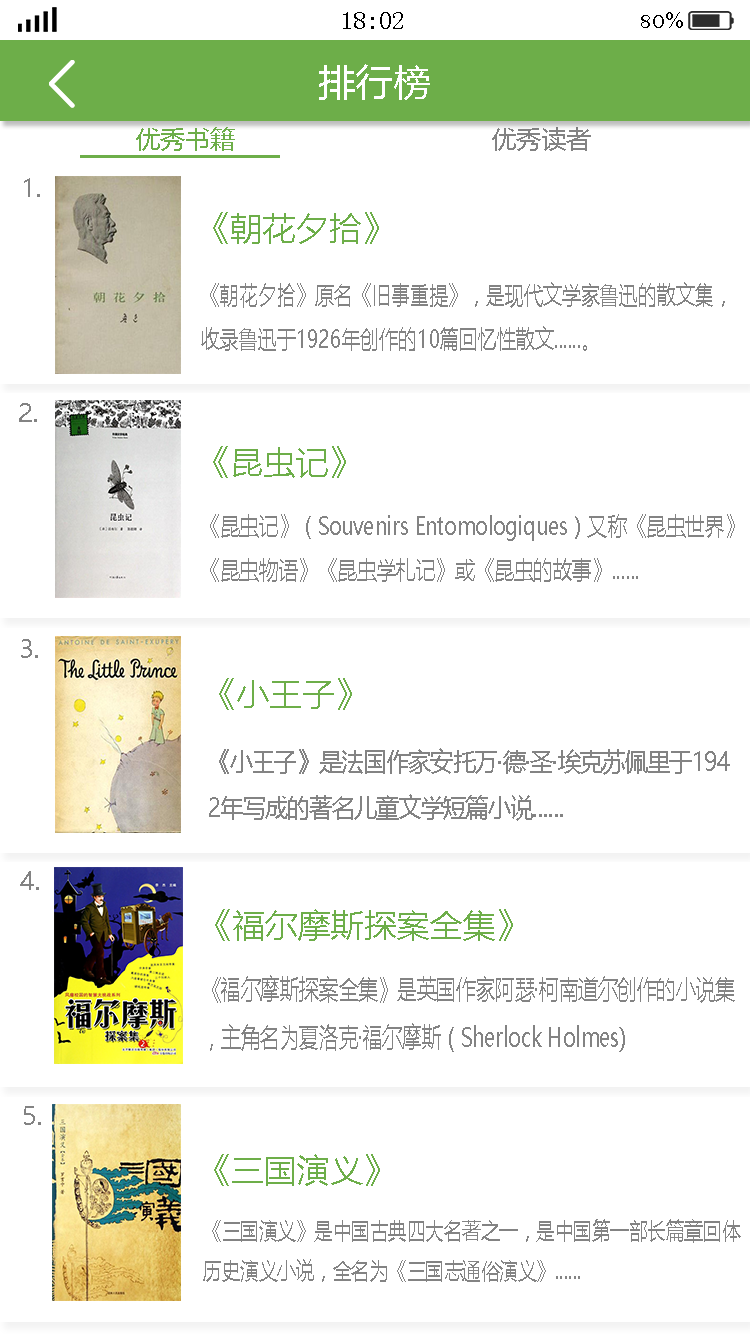
<style>
.page{position:relative;width:750px;height:1334px;background:#ffffff}
.page>*{position:absolute;margin:0}
.t1{font:25px "SimSun";color:#000000}
.t2{font:25px "BellMT";color:#000000}
.t3{font:37.5px "MicrosoftYaHei";color:#ffffff}
.t4{font:25px "MicrosoftYaHei";color:#6dae49}
.t5{font:25px "MicrosoftYaHei";color:#838383}
.t6{font:33.3px "MicrosoftYaHei";color:#6dae49}
.t7{font:25px "MicrosoftYaHei";color:#838383;scale:0.76 1}
.t8{font:25px "MicrosoftYaHei";color:#838383;scale:0.79 1}
.t9{font:26.3px "MicrosoftYaHei";color:#838383;scale:0.86 1}
.t10{font:27.5px "MicrosoftYaHei";color:#838383;scale:0.72 1}
.t11{font:22.9px "MicrosoftYaHei";color:#838383;scale:0.81 1}
</style>
<div class="page">
<p class="t1" style="left:343px;top:12px;width:60px;height:17px">18:02</p>
<p class="t2" style="left:641px;top:12px;width:42px;height:16px">80%</p>
<p class="t3" style="left:319px;top:64px;width:111px;height:36px">排行榜</p>
<p class="t4" style="left:136px;top:127px;width:99px;height:24px">优秀书籍</p>
<p class="t5" style="left:492px;top:127px;width:99px;height:24px">优秀读者</p>
<p class="t5" style="left:24px;top:178px;width:16px;height:19px">1.</p>
<p class="t6" style="left:213px;top:212px;width:166px;height:32px">《朝花夕拾》</p>
<p class="t7" style="left:201px;top:282px;width:524px;height:69px">《朝花夕拾》原名《旧事重提》，是现代文学家鲁迅的散文集，<br>收录鲁迅于1926年创作的10篇回忆性散文......。</p>
<p class="t5" style="left:19px;top:403px;width:18px;height:19px">2.</p>
<p class="t6" style="left:213px;top:446px;width:133px;height:32px">《昆虫记》</p>
<p class="t8" style="left:210px;top:514px;width:525px;height:68px">《昆虫记》（Souvenirs Entomologiques）又称《昆虫世界》<br>《昆虫物语》《昆虫学札记》或《昆虫的故事》......</p>
<p class="t5" style="left:21px;top:639px;width:17px;height:19px">3.</p>
<p class="t6" style="left:219px;top:678px;width:133px;height:32px">《小王子》</p>
<p class="t9" style="left:209px;top:748px;width:521px;height:73px">《小王子》是法国作家安托万·德·圣·埃克苏佩里于194<br>2年写成的著名儿童文学短篇小说......</p>
<p class="t5" style="left:20px;top:871px;width:19px;height:19px">4.</p>
<p class="t6" style="left:215px;top:909px;width:298px;height:32px">《福尔摩斯探案全集》</p>
<p class="t10" style="left:210px;top:975px;width:525px;height:77px">《福尔摩斯探案全集》是英国作家阿瑟·柯南道尔创作的小说集<br>，主角名为夏洛克·福尔摩斯（Sherlock Holmes)</p>
<p class="t5" style="left:24px;top:1106px;width:17px;height:19px">5.</p>
<p class="t6" style="left:214px;top:1154px;width:166px;height:32px">《三国演义》</p>
<p class="t11" style="left:203px;top:1219px;width:538px;height:63px">《三国演义》是中国古典四大名著之一，是中国第一部长篇章回体<br>历史演义小说，全名为《三国志通俗演义》......</p>
</div>
